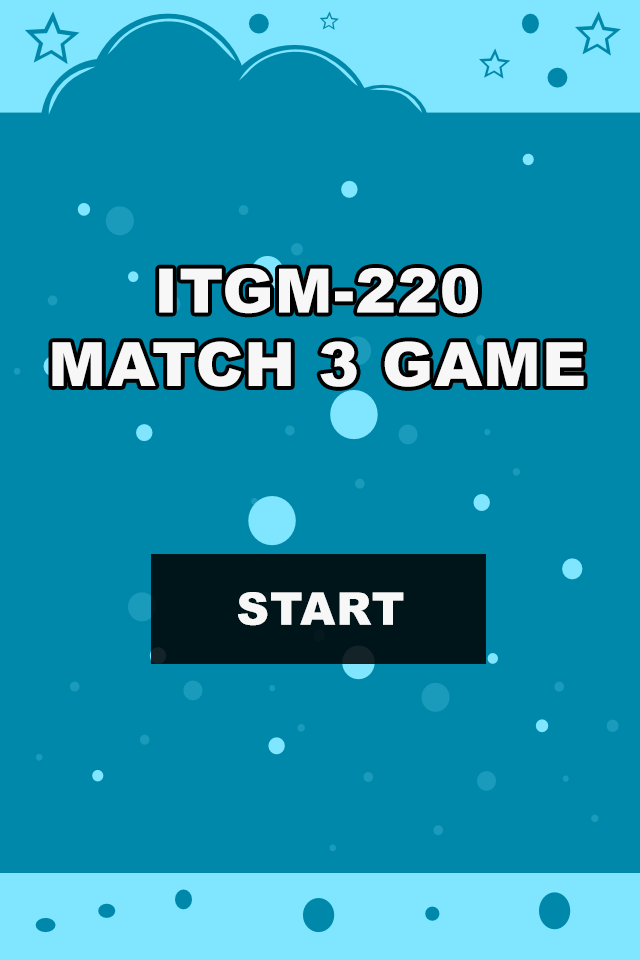
<style>
.page{position:relative;width:640px;height:960px;background:#0088aa}
.page>*{position:absolute;margin:0}
.t1{font:61.2px "Arial-Black";letter-spacing:0.02em;color:#f7f7f7}
</style>
<div class="page">
<p class="t1" style="left:52px;top:268px;width:532px;height:119px;text-align:center">ITGM-220<br>MATCH 3 GAME</p>
</div>
